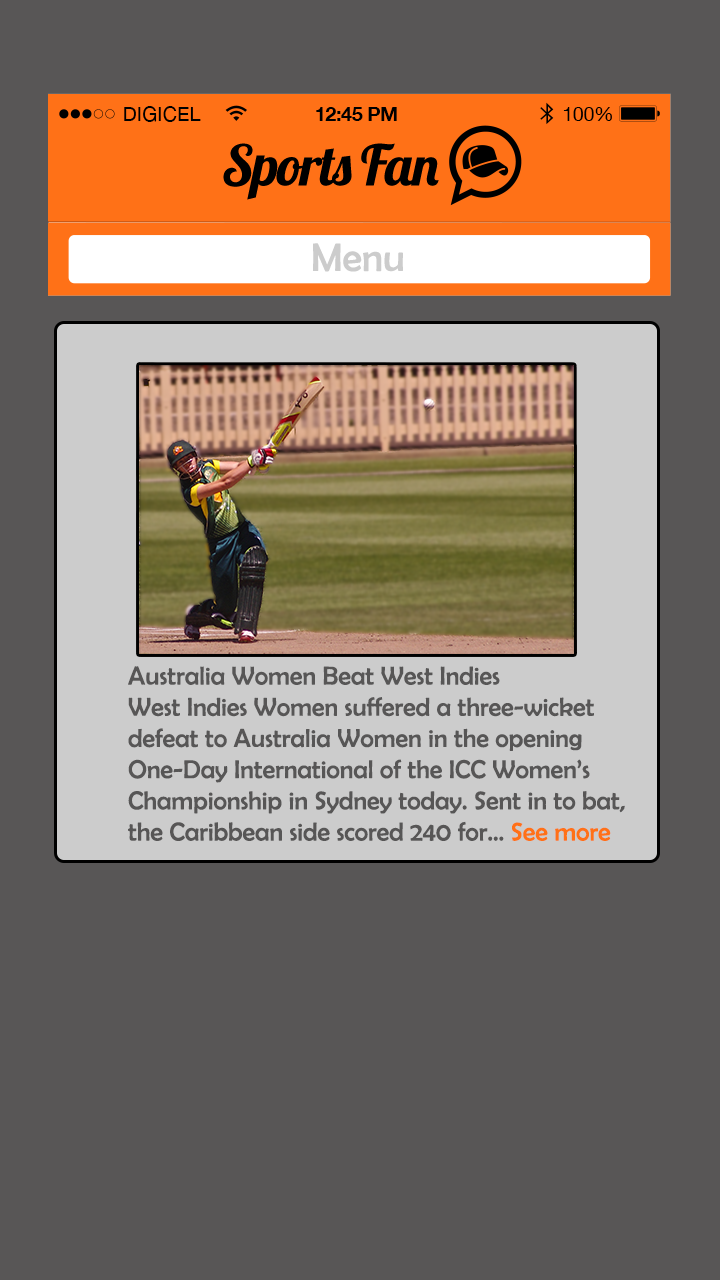
<style>
.page{position:relative;width:720px;height:1280px;background:#585656}
.page>*{position:absolute;margin:0}
.t1{font:26px "BerlinSansFB-Reg";color:#575656}
.t2{font:26px "BerlinSansFB-Reg";color:#ff7117}
</style>
<div class="page">
<p class="t1" style="left:128px;top:666px;width:497px;height:175px">Australia Women Beat West Indies <br>West Indies Women suffered a three-wicket <br>defeat to Australia Women in the opening <br>One-Day International of the ICC Women’s <br>Championship in Sydney today. Sent in to bat, <br>the Caribbean side scored 240 for... <span class="t2">See more</span></p>
</div>
